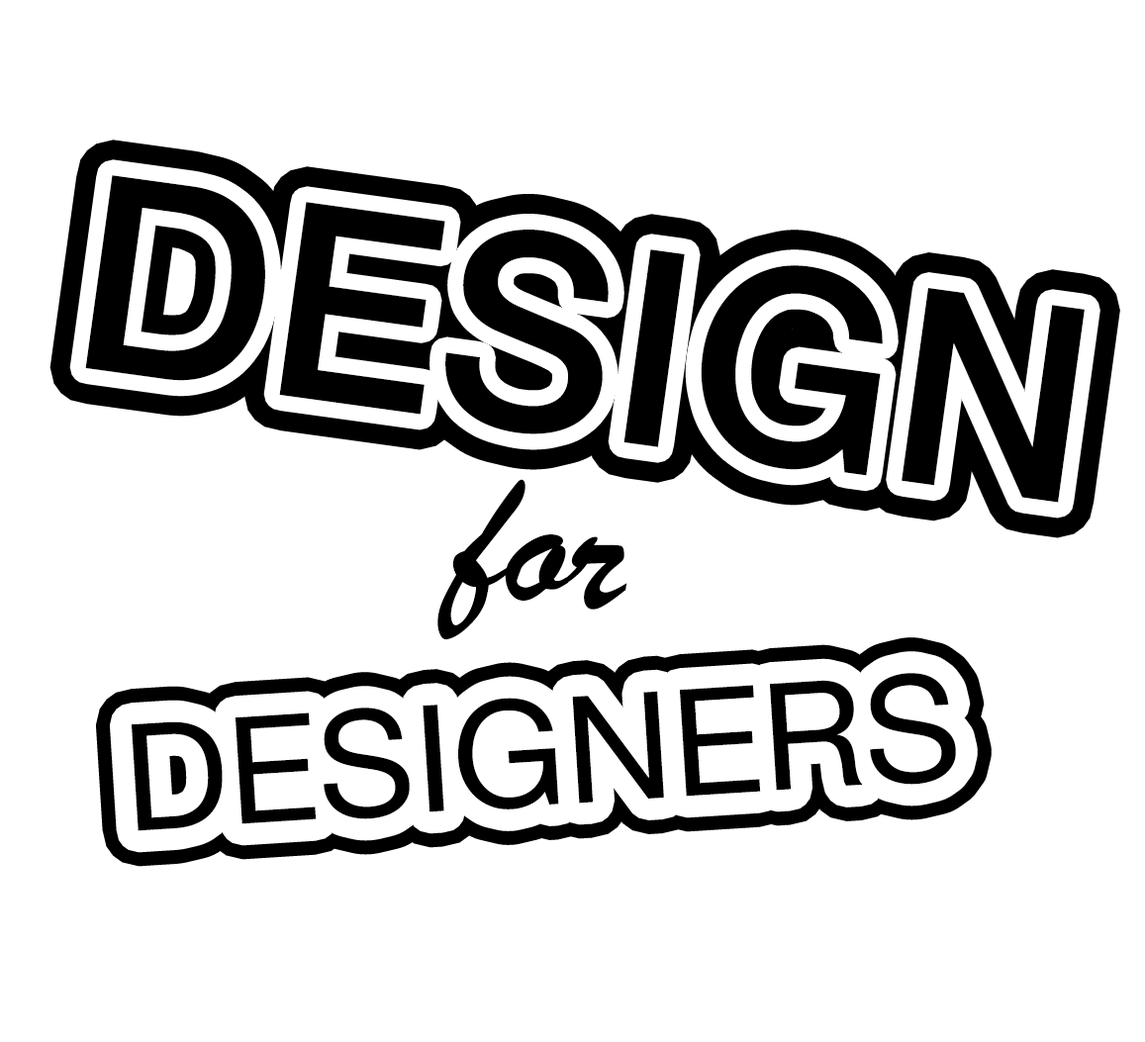
<style>
.page{position:relative;width:1145px;height:1042px;background:#ffffff}
.page>*{position:absolute;margin:0}
.t1{font:271.8px "HelveticaNeue-Medium";color:#000000}
.t2{font:197.9px "BrushScriptMT";color:#000000}
.t3{font:148.4px "HelveticaNeue";color:#000000}
</style>
<div class="page">
<p class="t1" style="left:85px;top:175px;width:999px;height:328px;rotate:8deg">DESIGN</p>
<p class="t2" style="left:437px;top:479px;width:190px;height:161px;rotate:8deg">for</p>
<p class="t3" style="left:131px;top:673px;width:825px;height:158px;rotate:-4deg">DESIGNERS</p>
</div>
